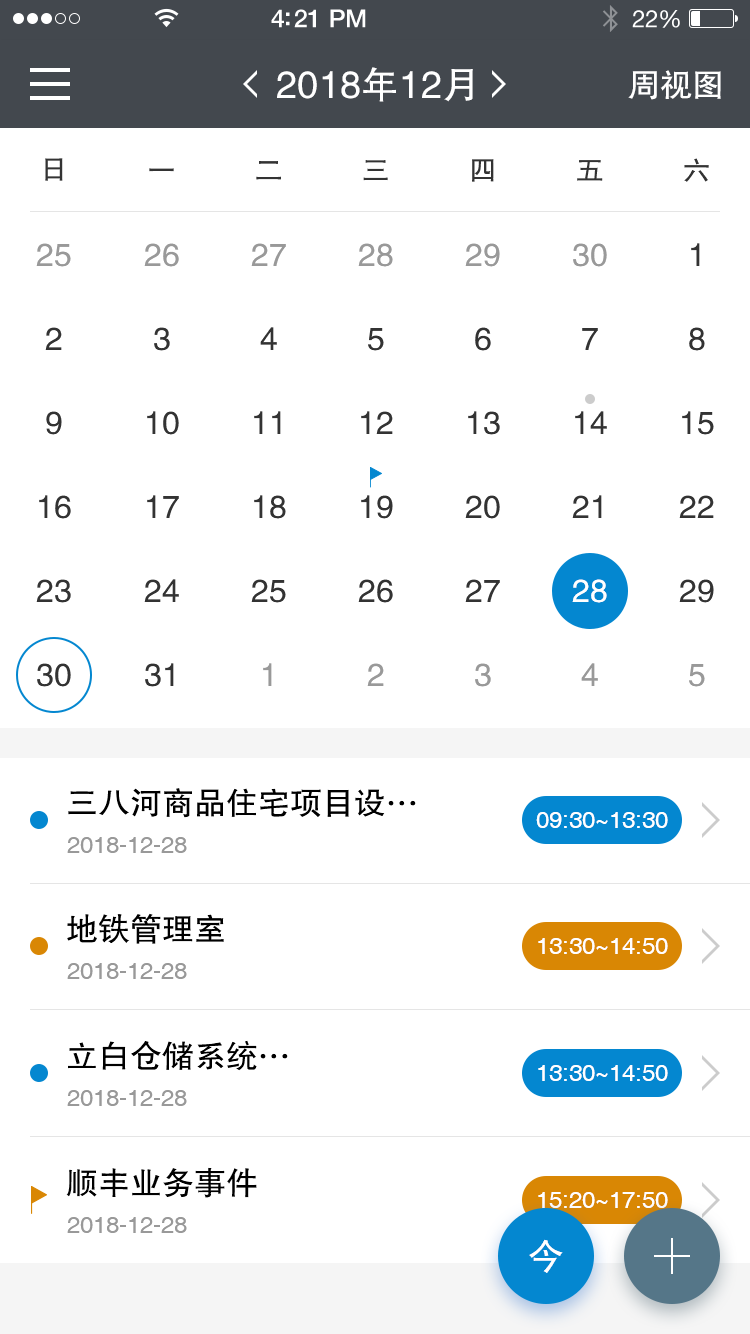
<style>
.page{position:relative;width:750px;height:1334px;background:#ffffff}
.page>*{position:absolute;margin:0}
.t1{font:38px "FZHTJW--GB1-0";color:#ffffff}
.t2{font:32px "FZHTJW--GB1-0";color:#ffffff}
.t3{font:28px "FZHTJW--GB1-0";color:#333333}
.t4{font:32px/84px "FZHTJW--GB1-0";color:#333333}
.t5{font:32px/84px "FZHTJW--GB1-0";color:#999999}
.t6{font:32px/84px "FZHTJW--GB1-0";color:#ffffff}
.t7{font:32px "FZHTJW--GB1-0";color:#000000}
.t8{font:24px "Helvetica";color:#ffffff}
.t9{font:24px "Helvetica";color:#999999}
.t10{font:36px "FZHTJW--GB1-0";color:#ffffff}
</style>
<div class="page">
<p class="t1" style="left:277px;top:67px;width:196px;height:35px">2018年12月</p>
<p class="t2" style="left:628px;top:70px;width:93px;height:30px">周视图</p>
<p class="t3" style="left:45px;top:158px;width:18px;height:23px">日</p>
<p class="t3" style="left:256px;top:161px;width:25px;height:19px">二</p>
<p class="t3" style="left:363px;top:160px;width:25px;height:21px">三</p>
<p class="t3" style="left:472px;top:159px;width:22px;height:23px">四</p>
<p class="t3" style="left:577px;top:160px;width:26px;height:21px">五</p>
<p class="t3" style="left:684px;top:158px;width:25px;height:24px">六</p>
<p class="t3" style="left:149px;top:168px;width:25px;height:4px">一</p>
<p class="t4" style="left:36px;top:243px;width:35px;height:444px;text-align:center"><span class="t5">25<br></span>2<br>9<br>16<br>23<br>30</p>
<p class="t4" style="left:144px;top:243px;width:35px;height:444px;text-align:center"><span class="t5">26<br></span>3<br>10<br>17<br>24<br>31</p>
<p class="t4" style="left:251px;top:243px;width:35px;height:443px;text-align:center"><span class="t5">27<br></span>4<br>11<br>18<br>25<br><span class="t5">1</span></p>
<p class="t4" style="left:358px;top:243px;width:35px;height:443px;text-align:center"><span class="t5">28<br></span>5<br>12<br>19<br>26<br><span class="t5">2</span></p>
<p class="t4" style="left:465px;top:243px;width:35px;height:444px;text-align:center"><span class="t5">29<br></span>6<br>13<br>20<br>27<br><span class="t5">3</span></p>
<p class="t4" style="left:572px;top:243px;width:35px;height:443px;text-align:center"><span class="t5">30<br></span>7<br>14<br>21<br><span class="t6">28<br></span><span class="t5">4</span></p>
<p class="t4" style="left:679px;top:243px;width:35px;height:444px;text-align:center">1<br>8<br>15<br>22<br>29<br><span class="t5">5</span></p>
<p class="t7" style="left:68px;top:788px;width:348px;height:30px">三八河商品住宅项目设…</p>
<p class="t8" style="left:536px;top:812px;width:132px;height:16px">09:30~13:30</p>
<p class="t9" style="left:67px;top:837px;width:120px;height:16px">2018-12-28</p>
<p class="t7" style="left:67px;top:913px;width:157px;height:31px">地铁管理室</p>
<p class="t8" style="left:538px;top:938px;width:130px;height:16px">13:30~14:50</p>
<p class="t9" style="left:67px;top:963px;width:120px;height:16px">2018-12-28</p>
<p class="t7" style="left:68px;top:1040px;width:220px;height:31px">立白仓储系统…</p>
<p class="t8" style="left:538px;top:1065px;width:130px;height:16px">13:30~14:50</p>
<p class="t9" style="left:67px;top:1090px;width:120px;height:16px">2018-12-28</p>
<p class="t7" style="left:66px;top:1167px;width:191px;height:31px">顺丰业务事件</p>
<p class="t8" style="left:538px;top:1192px;width:130px;height:16px">15:20~17:50</p>
<p class="t9" style="left:67px;top:1217px;width:120px;height:16px">2018-12-28</p>
<p class="t10" style="left:529px;top:1239px;width:34px;height:34px">今</p>
</div>
